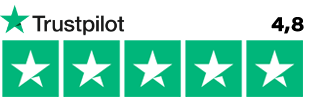
<style>
.page{position:relative;width:309px;height:101px;background:#ffffff}
.page>*{position:absolute;margin:0}
.t1{font:20.3px "AcuminConcept-WideBold";color:#000000}
</style>
<div class="page">
<p class="t1" style="left:271px;top:17px;width:33px;height:17px">4,8</p>
</div>
